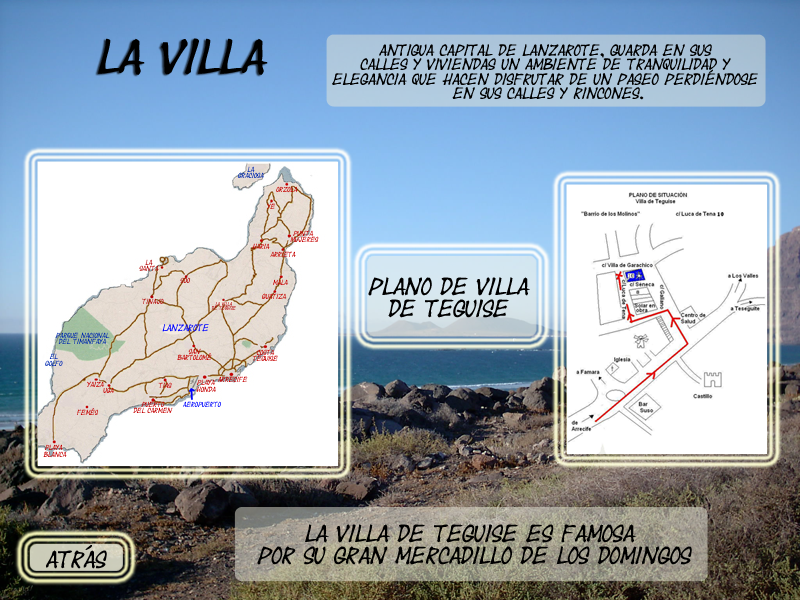
<style>
.page{position:relative;width:800px;height:600px}
.page>*{position:absolute;margin:0}
.t1{font:36px "Yearsupplyoffairycakes";color:#000000}
.t2{font:12px "Yearsupplyoffairycakes";color:#000000}
.t3{font:18px "Yearsupplyoffairycakes";color:#000000}
</style>
<div class="page">
<p class="t1" style="left:98px;top:38px;width:170px;height:37px">La villa</p>
<p class="t2" style="left:332px;top:44px;width:426px;height:56px;text-align:center">Antigua Capital de Lanzarote, guarda en sus <br>calles y viviendas un ambiente de tranquilidad y <br>elegancia que hacen disfrutar de un paseo perdiéndose <br>en sus calles y rincones.</p>
<p class="t3" style="left:368px;top:277px;width:162px;height:41px;text-align:center">Plano de villa<br>de teguise</p>
<p class="t3" style="left:257px;top:524px;width:435px;height:41px;text-align:center">la villa de teguise es famosa <br>por su gran mercadillo de los domingos</p>
<p class="t3" style="left:46px;top:545px;width:61px;height:24px">atrás</p>
</div>
